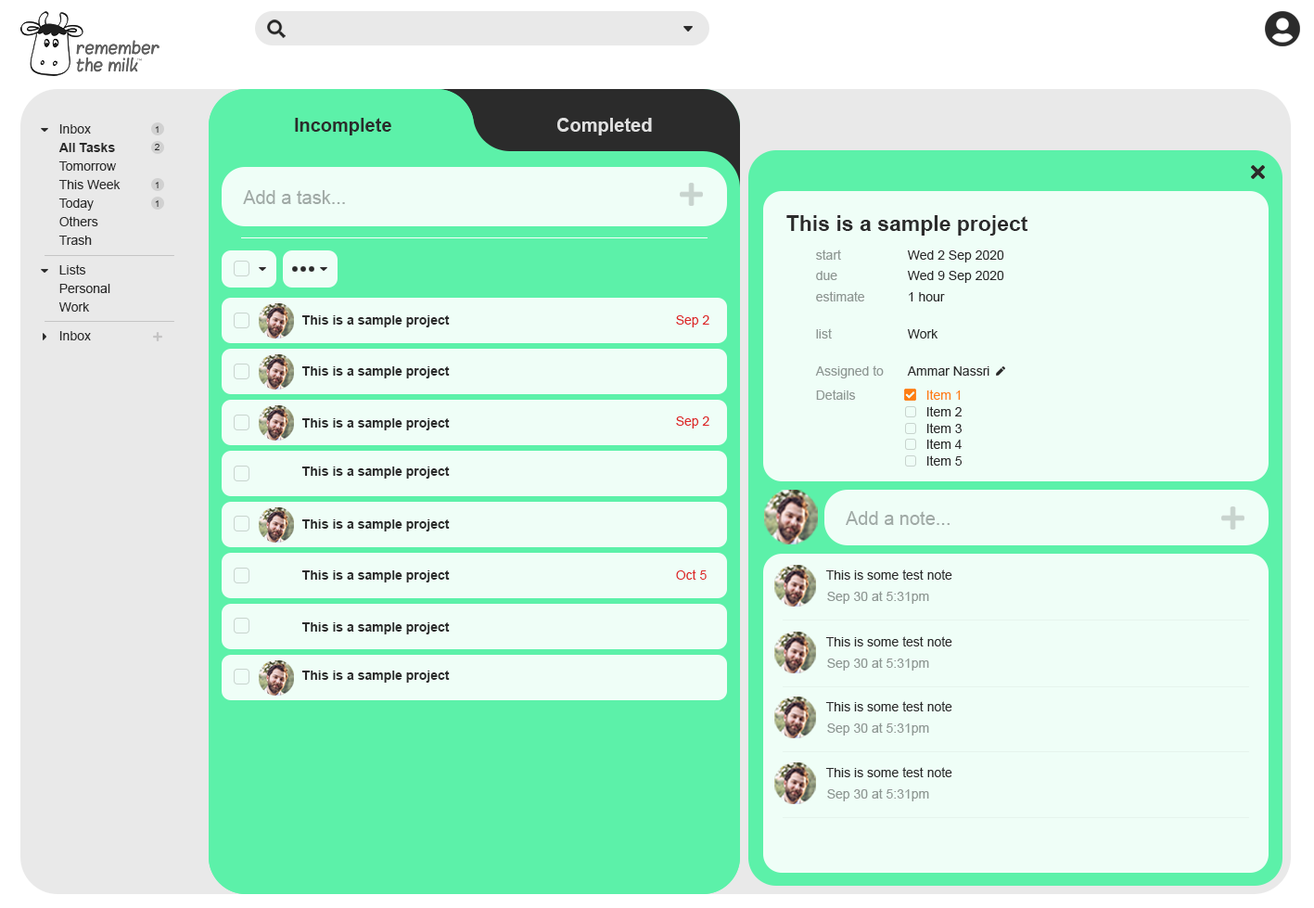
<style>
.page{position:relative;width:1314px;height:908px;background:#effef7}
.page>*{position:absolute;margin:0}
.t1{font:13px "ArialMT";color:#2b2b2b}
.t2{font:18.5px "Arial-BoldMT";color:#2b2b2b}
.t3{font:18.5px "Arial-BoldMT";color:#e0e0e0}
.t4{font:9.3px "ArialMT";color:#2b2b2b}
.t5{font:13px "Arial-BoldMT";color:#2b2b2b}
.t6{font:18.5px "ArialMT";color:#a0aaa6}
.t7{font:21.3px "Arial-BoldMT";color:#2b2b2b}
.t8{font:13px "ArialMT";color:#8e9793}
.t9{font:13px "ArialMT";color:#dd2727}
.t10{font:13px "ArialMT";color:#fd7e14}
</style>
<div class="page">
<p class="t1" style="left:59px;top:124px;width:32px;height:10px">Inbox</p>
<p class="t2" style="left:295px;top:118px;width:96px;height:17px">Incomplete</p>
<p class="t3" style="left:557px;top:118px;width:95px;height:17px">Completed</p>
<p class="t4" style="left:155px;top:126px;width:4px;height:7px">1</p>
<p class="t5" style="left:58px;top:143px;width:57px;height:9px">All Tasks</p>
<p class="t4" style="left:154px;top:144px;width:5px;height:6px">2</p>
<p class="t1" style="left:58px;top:161px;width:58px;height:10px">Tomorrow</p>
<p class="t1" style="left:58px;top:180px;width:63px;height:9px">This Week</p>
<p class="t4" style="left:155px;top:182px;width:4px;height:6px">1</p>
<p class="t6" style="left:243px;top:190px;width:102px;height:14px">Add a task...</p>
<p class="t1" style="left:58px;top:198px;width:36px;height:12px">Today</p>
<p class="t4" style="left:155px;top:200px;width:4px;height:7px">1</p>
<p class="t1" style="left:59px;top:216px;width:39px;height:10px">Others</p>
<p class="t7" style="left:786px;top:215px;width:242px;height:20px">This is a sample project</p>
<p class="t1" style="left:58px;top:235px;width:34px;height:10px">Trash</p>
<p class="t8" style="left:816px;top:249px;width:25px;height:11px">start</p>
<p class="t1" style="left:907px;top:250px;width:97px;height:12px">Wed 2 Sep 2020</p>
<p class="t1" style="left:59px;top:264px;width:27px;height:10px">Lists</p>
<p class="t8" style="left:816px;top:271px;width:21px;height:9px">due</p>
<p class="t1" style="left:907px;top:271px;width:97px;height:12px">Wed 9 Sep 2020</p>
<p class="t1" style="left:59px;top:284px;width:51px;height:9px">Personal</p>
<p class="t8" style="left:816px;top:291px;width:48px;height:10px">estimate</p>
<p class="t1" style="left:909px;top:292px;width:36px;height:9px">1 hour</p>
<p class="t1" style="left:58px;top:302px;width:32px;height:10px">Work</p>
<p class="t5" style="left:301px;top:315px;width:149px;height:12px">This is a sample project</p>
<p class="t9" style="left:676px;top:315px;width:33px;height:12px">Sep 2</p>
<p class="t8" style="left:816px;top:328px;width:16px;height:10px">list</p>
<p class="t1" style="left:907px;top:329px;width:31px;height:9px">Work</p>
<p class="t1" style="left:59px;top:331px;width:32px;height:9px">Inbox</p>
<p class="t8" style="left:815px;top:365px;width:69px;height:13px">Assigned to</p>
<p class="t5" style="left:301px;top:366px;width:149px;height:12px">This is a sample project</p>
<p class="t1" style="left:907px;top:366px;width:82px;height:9px">Ammar Nassri</p>
<p class="t8" style="left:816px;top:389px;width:40px;height:11px">Details</p>
<p class="t10" style="left:926px;top:389px;width:35px;height:11px">Item 1</p>
<p class="t1" style="left:926px;top:406px;width:35px;height:10px">Item 2</p>
<p class="t5" style="left:301px;top:418px;width:149px;height:12px">This is a sample project</p>
<p class="t9" style="left:676px;top:416px;width:33px;height:12px">Sep 2</p>
<p class="t1" style="left:926px;top:423px;width:35px;height:10px">Item 3</p>
<p class="t1" style="left:926px;top:439px;width:35px;height:10px">Item 4</p>
<p class="t1" style="left:926px;top:455px;width:35px;height:10px">Item 5</p>
<p class="t5" style="left:301px;top:466px;width:149px;height:12px">This is a sample project</p>
<p class="t5" style="left:301px;top:519px;width:149px;height:12px">This is a sample project</p>
<p class="t6" style="left:846px;top:511px;width:103px;height:14px">Add a note...</p>
<p class="t9" style="left:676px;top:569px;width:30px;height:10px">Oct 5</p>
<p class="t1" style="left:825px;top:569px;width:127px;height:10px">This is some test note</p>
<p class="t5" style="left:301px;top:570px;width:149px;height:12px">This is a sample project</p>
<p class="t8" style="left:827px;top:591px;width:102px;height:13px">Sep 30 at 5:31pm</p>
<p class="t5" style="left:301px;top:622px;width:149px;height:12px">This is a sample project</p>
<p class="t1" style="left:825px;top:636px;width:127px;height:10px">This is some test note</p>
<p class="t8" style="left:827px;top:657px;width:102px;height:13px">Sep 30 at 5:31pm</p>
<p class="t5" style="left:301px;top:670px;width:149px;height:12px">This is a sample project</p>
<p class="t1" style="left:825px;top:701px;width:127px;height:10px">This is some test note</p>
<p class="t8" style="left:827px;top:722px;width:102px;height:13px">Sep 30 at 5:31pm</p>
<p class="t1" style="left:825px;top:767px;width:127px;height:10px">This is some test note</p>
<p class="t8" style="left:827px;top:788px;width:102px;height:13px">Sep 30 at 5:31pm</p>
</div>
